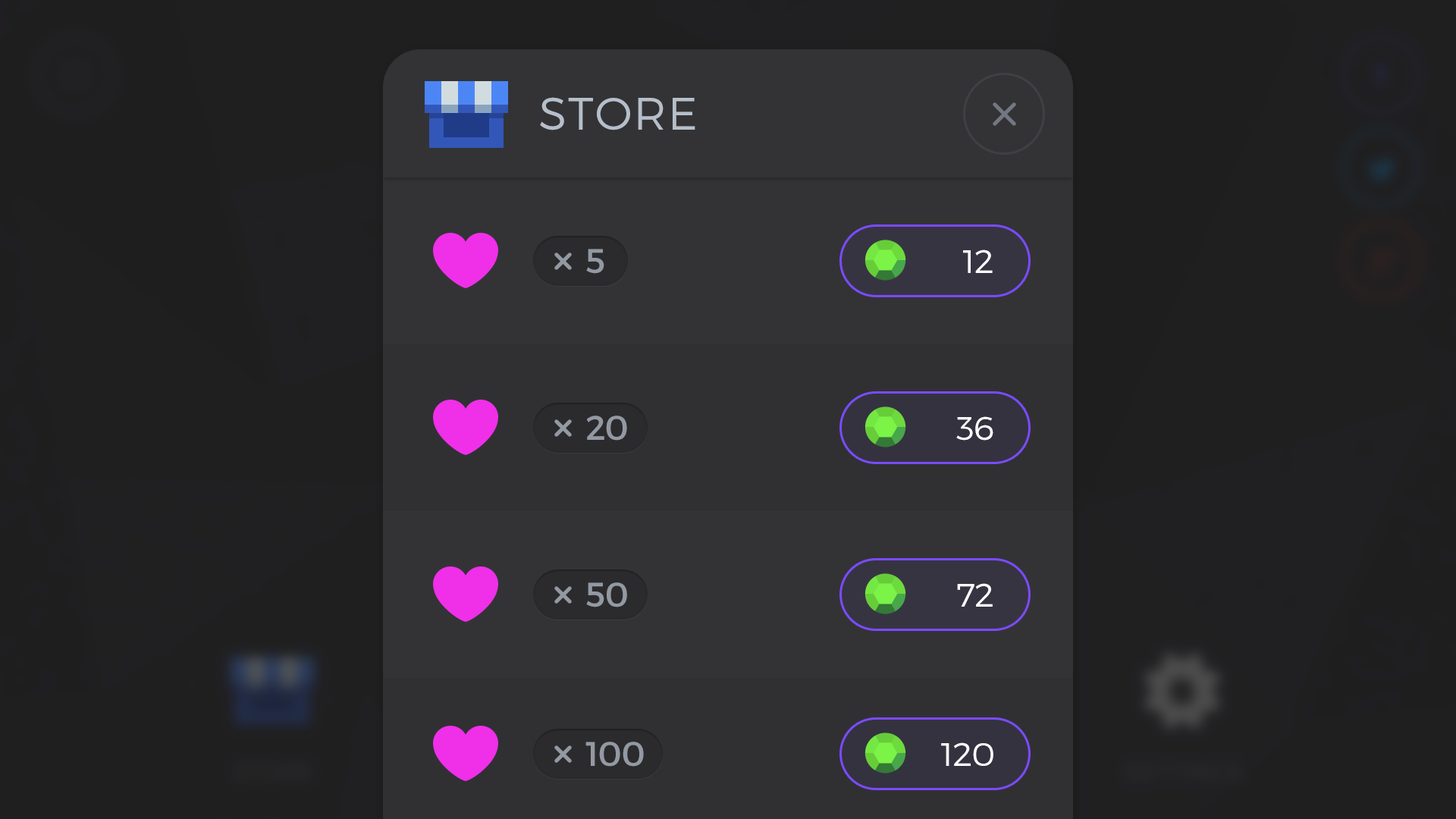
<style>
.page{position:relative;width:1456px;height:819px;background:#333336}
.page>*{position:absolute;margin:0}
.t1{font:45.5px "Montserrat-Light";letter-spacing:0.03em;color:#b6bfc9;text-transform:uppercase}
.t2{font:34.1px "Montserrat-Regular";color:#9399a3}
.t3{font:32.4px "Montserrat-Light";letter-spacing:-0.025em;color:#ffffff;text-transform:uppercase;scale:1.05 1}
</style>
<div class="page">
<p class="t1" style="left:540px;top:97px;width:155px;height:33px">store</p>
<p class="t2" style="left:586px;top:249px;width:18px;height:25px">5</p>
<p class="t3" style="left:963px;top:249px;width:30px;height:24px">12</p>
<p class="t2" style="left:586px;top:416px;width:41px;height:25px">20</p>
<p class="t3" style="left:956px;top:416px;width:37px;height:25px">36</p>
<p class="t2" style="left:586px;top:582px;width:41px;height:25px">50</p>
<p class="t3" style="left:957px;top:583px;width:36px;height:24px">72</p>
<p class="t2" style="left:585px;top:742px;width:59px;height:25px">100</p>
<p class="t3" style="left:941px;top:742px;width:52px;height:24px">120</p>
</div>
